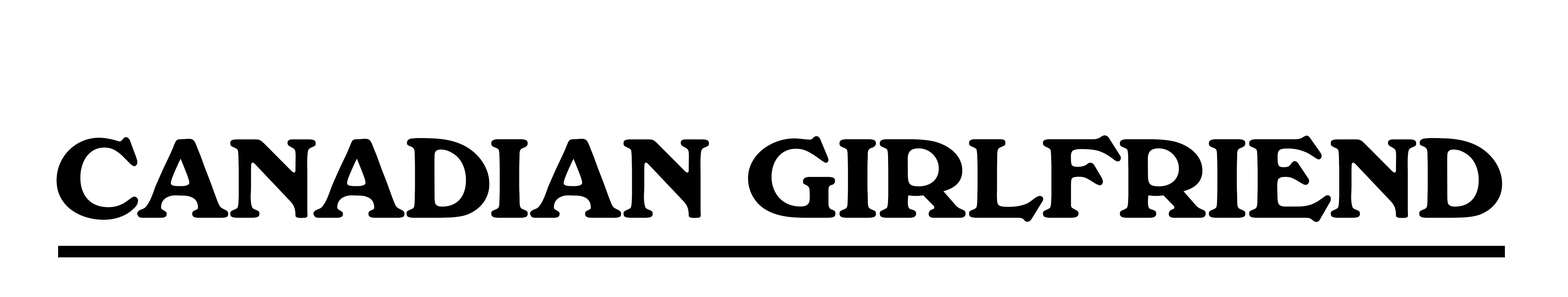
<style>
.page{position:relative;width:1568px;height:297px;background:#ffffff}
.page>*{position:absolute;margin:0}
.t1{font:117.8px "WindsorBOLD";color:#000000}
</style>
<div class="page">
<p class="t1" style="left:57px;top:135px;width:1445px;height:87px">CANADIAN GIRLFRIEND</p>
</div>
